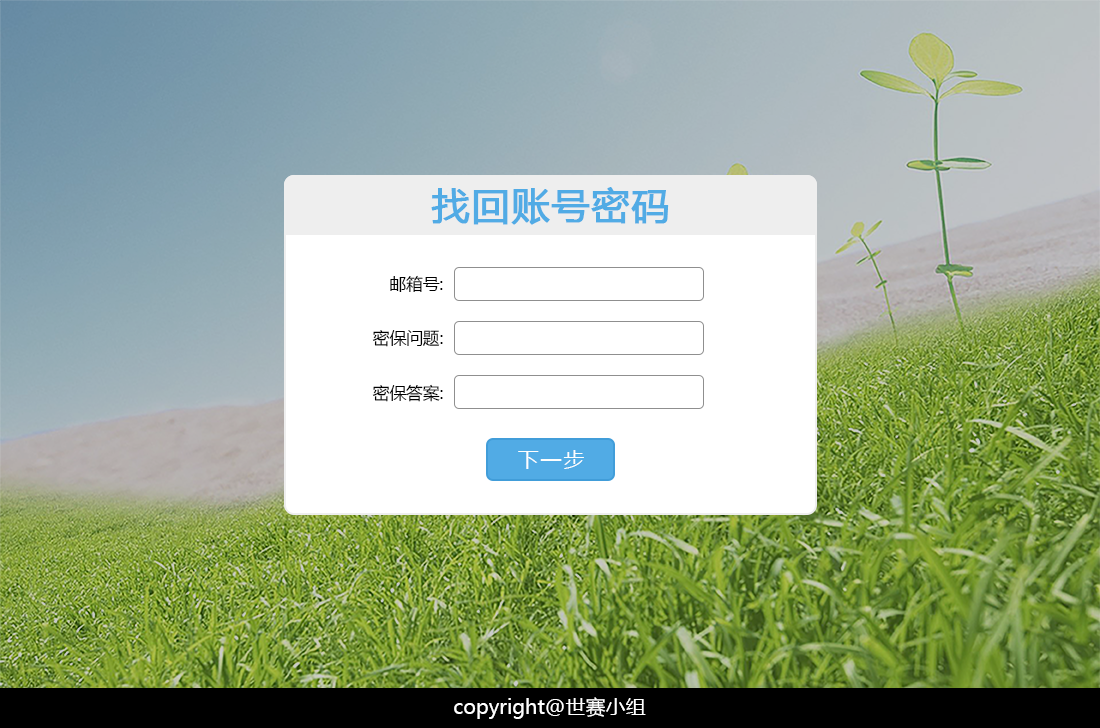
<style>
.page{position:relative;width:1100px;height:728px}
.page>*{position:absolute;margin:0}
.t1{font:38px "MicrosoftYaHei";letter-spacing:0.025em;color:#51abe5;font-weight:bold}
.t2{font:16.7px "MicrosoftYaHei";color:#000000}
.t3{font:20.8px "MicrosoftYaHei";letter-spacing:0.1em;color:#fefefe}
.t4{font:20px "MicrosoftYaHei";color:#ffffff}
</style>
<div class="page">
<p class="t1" style="left:431px;top:187px;width:238px;height:38px">找回账号密码</p>
<p class="t2" style="left:390px;top:275px;width:53px;height:17px">邮箱号:</p>
<p class="t2" style="left:372px;top:330px;width:71px;height:17px">密保问题:</p>
<p class="t2" style="left:372px;top:384px;width:71px;height:18px">密保答案:</p>
<p class="t3" style="left:518px;top:450px;width:66px;height:19px">下一步</p>
<p class="t4" style="left:454px;top:697px;width:192px;height:22px">copyright@世赛小组</p>
</div>
